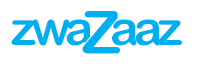
<style>
.page{position:relative;width:200px;height:64px;background:#ffffff}
.page>*{position:absolute;margin:0}
.t1{font:59.5px "ArialRoundedMTBold";letter-spacing:-0.1em;color:#00aff0}
.t2{font:48px "ArialRoundedMTBold";letter-spacing:-0.1em;color:#00aff0}
</style>
<div class="page">
<p class="t1" style="left:82px;top:11px;width:38px;height:43px">Z</p>
<p class="t2" style="left:11px;top:19px;width:171px;height:27px">zwa   aaz</p>
</div>
